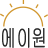
<style>
.page{position:relative;width:48px;height:48px;background:#ffffff}
.page>*{position:absolute;margin:0}
.t1{font:22.5px "GmarketSansLight";letter-spacing:0.1em;color:#282828;font-weight:bold;scale:0.63 1}
</style>
<div class="page">
<p class="t1" style="left:2px;top:28px;width:43px;height:20px">에이원</p>
</div>
